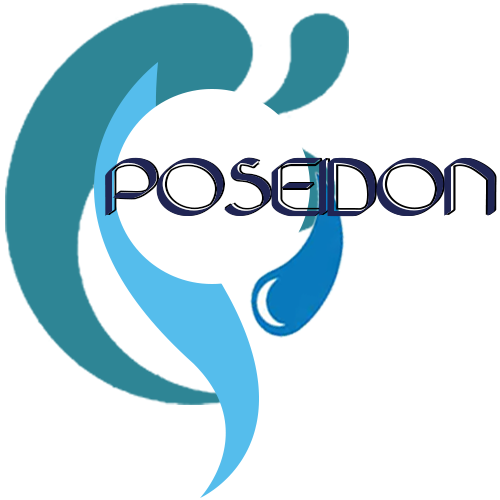
<style>
.page{position:relative;width:500px;height:500px;background:#ffffff}
.page>*{position:absolute;margin:0}
.t1{font:85.6px "SundevalleOutline";letter-spacing:-0.07em;scale:1.29 1}
.t2{font:85.6px "Sundevalle";letter-spacing:-0.07em;color:#202554;scale:1.29 1}
</style>
<div class="page">
<p class="t1" style="left:105px;top:157px;width:392px;height:60px">POSEIDON</p>
<p class="t2" style="left:105px;top:157px;width:390px;height:60px">POSEIDON</p>
</div>
